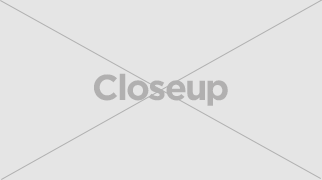
<style>
.page{position:relative;width:322px;height:180px;background:#e5e5e5}
.page>*{position:absolute;margin:0}
.t1{font:36px "GothamBold";letter-spacing:-0.05em;color:#b1b0b0}
</style>
<div class="page">
<p class="t1" style="left:94px;top:73px;width:134px;height:33px">Closeup</p>
</div>
